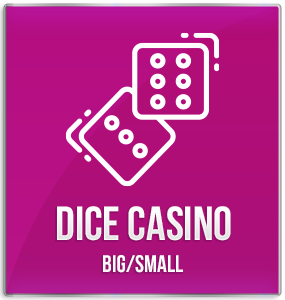
<style>
.page{position:relative;width:285px;height:300px}
.page>*{position:absolute;margin:0}
.t1{font:48px "BebasNeueBold";color:#ffffff;text-transform:uppercase}
.t2{font:24px "BebasNeueBold";color:#ffffff}
</style>
<div class="page">
<p class="t1" style="left:57px;top:206px;width:174px;height:35px">dice casino</p>
<p class="t2" style="left:103px;top:255px;width:80px;height:18px">big/small</p>
</div>
